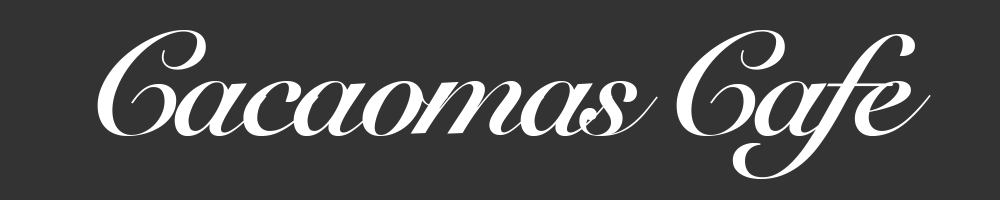
<style>
.page{position:relative;width:1000px;height:200px;background:#333333}
.page>*{position:absolute;margin:0}
.t1{font:144px "SnellRoundhand-Bold";letter-spacing:-0.05em;color:#ffffff}
</style>
<div class="page">
<p class="t1" style="left:97px;top:30px;width:834px;height:149px">Cacaomas Cafe</p>
</div>
